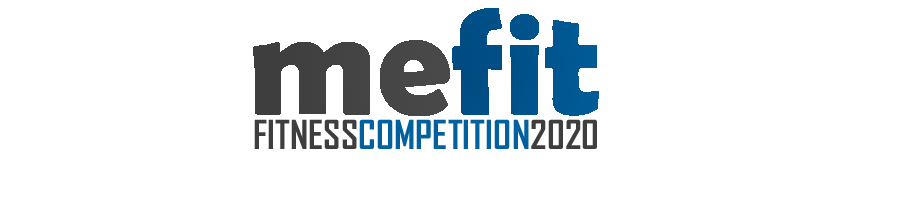
<style>
.page{position:relative;width:909px;height:200px;background:#ffffff}
.page>*{position:absolute;margin:0}
.t1{font:38.2px "AgencyFB-Bold";color:#00619e}
.t2{font:38.2px "AgencyFB-Bold";color:#3f3e3f}
</style>
<div class="page">
<p class="t1" style="left:254px;top:119px;width:343px;height:30px"><span class="t2">FITNESS</span>COMPETITION<span class="t2">2020</span></p>
</div>
